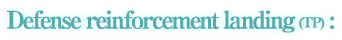
<style>
.page{position:relative;width:342px;height:40px;background:#ffffff}
.page>*{position:absolute;margin:0}
.t1{font:24px "RyuminPro-ExBold";letter-spacing:-0.09em;color:#51abaf}
</style>
<div class="page">
<p class="t1" style="left:7px;top:10px;width:327px;height:23px">Defense reinforcement landing (TP) :</p>
</div>
